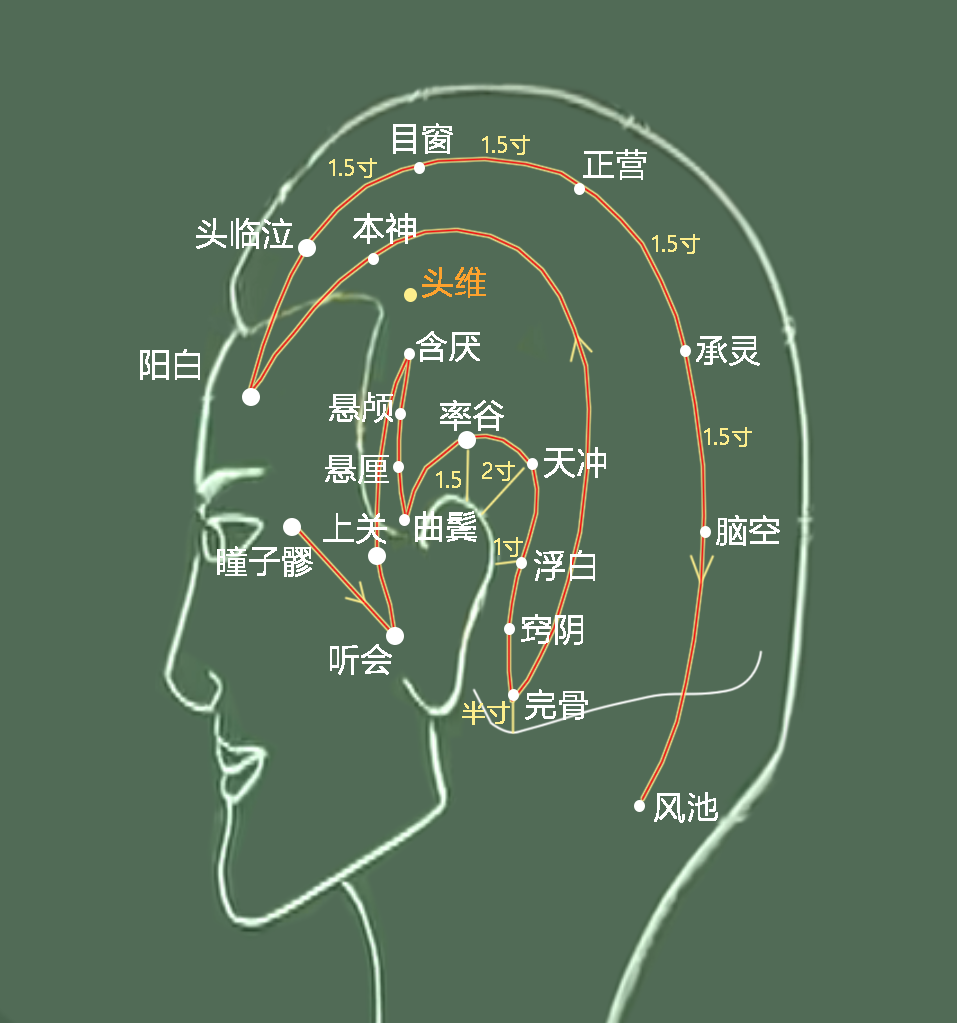
<style>
.page{position:relative;width:957px;height:1023px;background:#516b56}
.page>*{position:absolute;margin:0}
.t1{font:32px "MicrosoftYaHeiLight";color:#ffffff;font-weight:bold}
.t2{font:21.3px "MicrosoftYaHeiLight";color:#fdee8c;font-weight:bold}
.t3{font:32px "MicrosoftYaHeiLight";color:#fda22d;font-weight:bold}
.t4{font:24px "MicrosoftYaHeiLight";color:#fdee8c;font-weight:bold}
</style>
<div class="page">
<p class="t1" style="left:393px;top:123px;width:60px;height:31px">目窗</p>
<p class="t2" style="left:482px;top:135px;width:48px;height:20px">1.5寸</p>
<p class="t1" style="left:583px;top:149px;width:64px;height:31px">正营</p>
<p class="t2" style="left:329px;top:158px;width:48px;height:20px">1.5寸</p>
<p class="t1" style="left:196px;top:218px;width:97px;height:31px">头临泣</p>
<p class="t1" style="left:353px;top:213px;width:63px;height:31px">本神</p>
<p class="t2" style="left:652px;top:234px;width:48px;height:20px">1.5寸</p>
<p class="t3" style="left:422px;top:267px;width:64px;height:31px">头维</p>
<p class="t1" style="left:416px;top:331px;width:64px;height:31px">含厌</p>
<p class="t1" style="left:696px;top:336px;width:64px;height:30px">承灵</p>
<p class="t1" style="left:140px;top:349px;width:60px;height:31px">阳白</p>
<p class="t1" style="left:329px;top:392px;width:64px;height:31px">悬颅</p>
<p class="t1" style="left:440px;top:400px;width:64px;height:31px">率谷</p>
<p class="t2" style="left:704px;top:427px;width:48px;height:20px">1.5寸</p>
<p class="t1" style="left:544px;top:447px;width:62px;height:31px">天冲</p>
<p class="t1" style="left:325px;top:455px;width:64px;height:29px">悬厘</p>
<p class="t2" style="left:482px;top:461px;width:33px;height:20px">2寸</p>
<p class="t2" style="left:436px;top:471px;width:25px;height:17px">1.5</p>
<p class="t1" style="left:323px;top:513px;width:64px;height:31px">上关</p>
<p class="t1" style="left:415px;top:511px;width:62px;height:31px">曲鬓</p>
<p class="t1" style="left:716px;top:515px;width:64px;height:31px">脑空</p>
<p class="t2" style="left:494px;top:537px;width:29px;height:20px">1寸</p>
<p class="t1" style="left:217px;top:546px;width:96px;height:31px">瞳子髎</p>
<p class="t1" style="left:534px;top:550px;width:61px;height:31px">浮白</p>
<p class="t1" style="left:521px;top:614px;width:62px;height:31px">窍阴</p>
<p class="t1" style="left:330px;top:644px;width:62px;height:31px">听会</p>
<p class="t1" style="left:525px;top:689px;width:63px;height:31px">完骨</p>
<p class="t4" style="left:462px;top:701px;width:48px;height:24px">半寸</p>
<p class="t1" style="left:654px;top:792px;width:64px;height:31px">风池</p>
</div>
